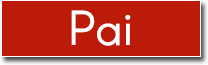
<style>
.page{position:relative;width:208px;height:65px;background:#bc1b0a}
.page>*{position:absolute;margin:0}
.t1{font:48px "Arcon-Regular";color:#ffffff}
</style>
<div class="page">
<p class="t1" style="left:71px;top:10px;width:60px;height:36px">Pai</p>
</div>
